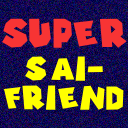
<style>
.page{position:relative;width:128px;height:128px}
.page>*{position:absolute;margin:0}
.t1{font:29.1px "TypefaceMario64";color:#f73434}
.t2{font:24.3px "TypefaceMario64";color:#ffff00}
</style>
<div class="page">
<p class="t1" style="left:2px;top:18px;width:125px;height:30px">Super</p>
<p class="t2" style="left:4px;top:56px;width:120px;height:54px;text-align:center">Sai-<br>Friend</p>
</div>
